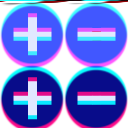
<style>
.page{position:relative;width:128px;height:128px;background:#4157ff}
.page>*{position:absolute;margin:0}
.t1{font:72px "Helvetica-Bold";color:#e1e8ff}
</style>
<div class="page">
<p class="t1" style="left:13px;top:12px;width:39px;height:39px">+</p>
</div>
